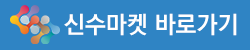
<style>
.page{position:relative;width:250px;height:50px;background:#2f84c4}
.page>*{position:absolute;margin:0}
.t1{font:24px "KoPubDotumBold";color:#ffffff}
</style>
<div class="page">
<p class="t1" style="left:64px;top:13px;width:173px;height:23px">신수마켓 바로가기</p>
</div>
